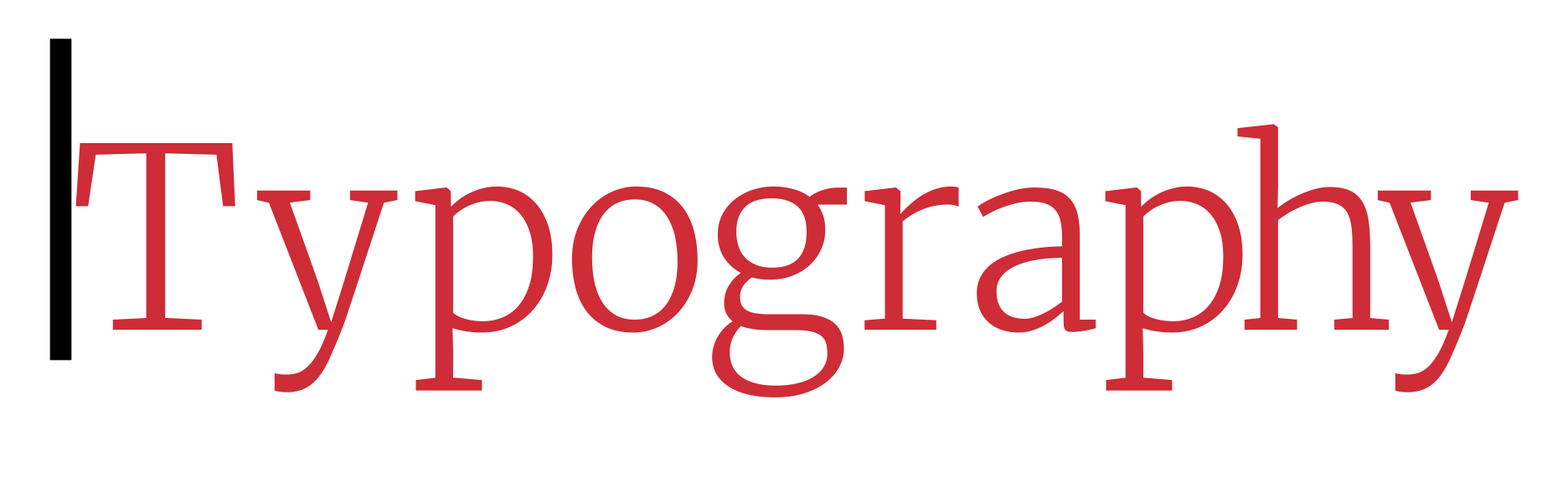
<style>
.page{position:relative;width:1568px;height:482px;background:#ffffff}
.page>*{position:absolute;margin:0}
.t1{font:251.3px "MerriweatherLight";color:#ce2c37}
.t2{font:335px "MerriweatherLight";letter-spacing:-0.24em;color:#000000}
.t3{font:251.3px "MerriweatherLight";letter-spacing:0.06em;color:#ce2c37}
.t4{font:251.3px "MerriweatherLight";letter-spacing:0.04em;color:#ce2c37}
.t5{font:251.3px "MerriweatherLight";letter-spacing:-0.02em;color:#ce2c37}
.t6{font:251.3px "MerriweatherLight";letter-spacing:-0.04em;color:#ce2c37}
.t7{font:251.3px "MerriweatherLight";letter-spacing:-0.08em;color:#ce2c37}
</style>
<div class="page">
<p class="t1" style="left:49px;top:39px;width:1470px;height:359px"><span class="t2">|</span><span class="t3">T</span><span class="t4">y</span><span class="t5">p</span><span class="t6">o</span>gr<span class="t5">a</span><span class="t7">ph</span>y</p>
</div>
